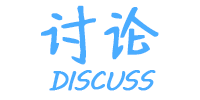
<style>
.page{position:relative;width:200px;height:100px;background:#ffffff}
.page>*{position:absolute;margin:0}
.t1{font:58.7px "SentyMARUKO";letter-spacing:-0.02em;color:#4aacff;text-transform:uppercase;font-weight:bold}
.t2{font:26.7px "MVBoli";letter-spacing:-0.02em;color:#4aacff;text-transform:uppercase;font-weight:bold}
</style>
<div class="page">
<p class="t1" style="left:41px;top:5px;width:118px;height:60px">讨论</p>
<p class="t2" style="left:49px;top:70px;width:107px;height:21px">DISCUSS</p>
</div>
